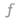
<style>
.page{position:relative;width:19px;height:19px;background:#ffffff}
.page>*{position:absolute;margin:0}
.t1{font:14.7px "ScalaSansBoldItalic";color:#999999}
</style>
<div class="page">
<p class="t1" style="left:5px;top:3px;width:10px;height:15px">f</p>
</div>
